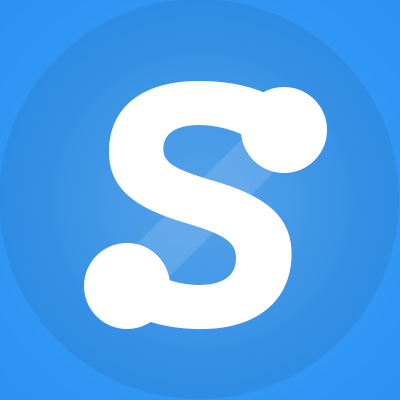
<style>
.page{position:relative;width:400px;height:400px;background:#ffffff}
.page>*{position:absolute;margin:0}
.t1{font:396.8px "Texta-Heavy";color:#ffffff}
</style>
<div class="page">
<p class="t1" style="left:105px;top:81px;width:187px;height:248px">S</p>
</div>
